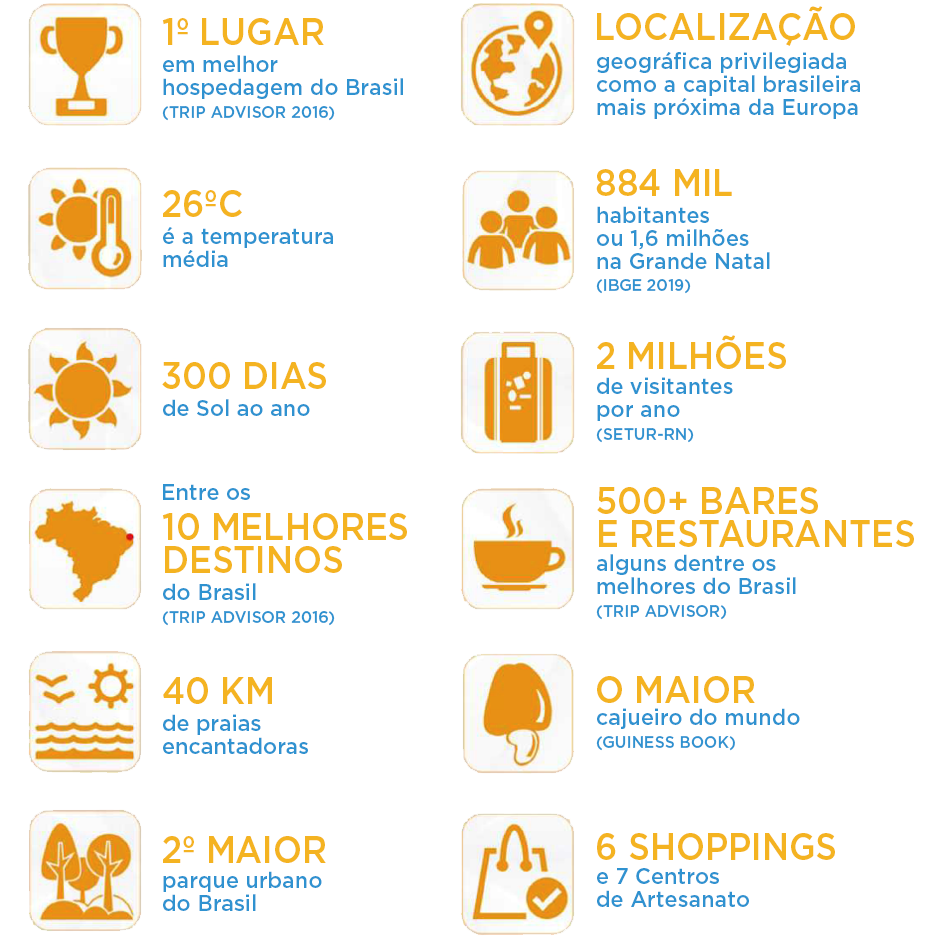
<style>
.page{position:relative;width:939px;height:939px;background:#ffffff}
.page>*{position:absolute;margin:0}
.t1{font:37.2px "Gotham-Medium";color:#f4b321;scale:0.92 1}
.t2{font:22.8px/22.8px "Gotham-Medium";color:#2f92d0;scale:0.95 1}
.t3{font:16.6px/22.8px "Gotham-Medium";color:#2f92d0;scale:0.95 1}
.t4{font:22.8px "Gotham-Medium";color:#2f92d0;scale:0.95 1}
.t5{font:37.2px/33.1px "Gotham-Medium";color:#f4b321;scale:0.92 1}
</style>
<div class="page">
<p class="t1" style="left:597px;top:6px;width:258px;height:40px">LOCALIZAÇÃO</p>
<p class="t1" style="left:162px;top:18px;width:162px;height:27px">1º LUGAR</p>
<p class="t2" style="left:597px;top:52px;width:263px;height:67px">geográfica privilegiada<br>como a capital brasileira<br>mais próxima da Europa</p>
<p class="t2" style="left:162px;top:55px;width:241px;height:66px">em melhor<br>hospedagem do Brasil<br><span class="t3">(TRIP ADVISOR 2016)</span></p>
<p class="t1" style="left:596px;top:169px;width:136px;height:27px">884 MIL</p>
<p class="t1" style="left:163px;top:190px;width:79px;height:27px">26ºC</p>
<p class="t2" style="left:596px;top:206px;width:174px;height:88px">habitantes<br>ou 1,6 milhões<br>na Grande Natal<br><span class="t3">(IBGE 2019)</span></p>
<p class="t2" style="left:163px;top:227px;width:170px;height:40px">é a temperatura<br>média</p>
<p class="t1" style="left:597px;top:335px;width:189px;height:34px">2 MILHÕES</p>
<p class="t1" style="left:162px;top:362px;width:164px;height:27px">300 DIAS</p>
<p class="t2" style="left:596px;top:377px;width:137px;height:66px">de visitantes<br>por ano<br><span class="t3">(SETUR-RN)</span></p>
<p class="t4" style="left:163px;top:399px;width:147px;height:17px">de Sol ao ano</p>
<p class="t4" style="left:163px;top:484px;width:87px;height:16px">Entre os</p>
<p class="t5" style="left:597px;top:487px;width:317px;height:60px">500+ BARES<br>E RESTAURANTES</p>
<p class="t5" style="left:162px;top:513px;width:245px;height:60px">10 MELHORES<br>DESTINOS</p>
<p class="t2" style="left:596px;top:554px;width:200px;height:66px">alguns dentre os<br>melhores do Brasil<br><span class="t3">(TRIP ADVISOR)</span></p>
<p class="t3" style="left:162px;top:583px;width:173px;height:43px"><span class="t2">do Brasil<br></span>(TRIP ADVISOR 2016)</p>
<p class="t1" style="left:163px;top:677px;width:109px;height:27px">40 KM</p>
<p class="t1" style="left:597px;top:676px;width:158px;height:27px">O MAIOR</p>
<p class="t2" style="left:596px;top:708px;width:204px;height:43px">cajueiro do mundo<br><span class="t3">(GUINESS BOOK)</span></p>
<p class="t2" style="left:163px;top:714px;width:145px;height:40px">de praias<br>encantadoras</p>
<p class="t1" style="left:597px;top:833px;width:238px;height:27px">6 SHOPPINGS</p>
<p class="t1" style="left:163px;top:836px;width:163px;height:27px">2º MAIOR</p>
<p class="t2" style="left:597px;top:868px;width:152px;height:39px">e 7 Centros<br>de Artesanato</p>
<p class="t2" style="left:163px;top:871px;width:159px;height:40px">parque urbano<br>do Brasil</p>
</div>
